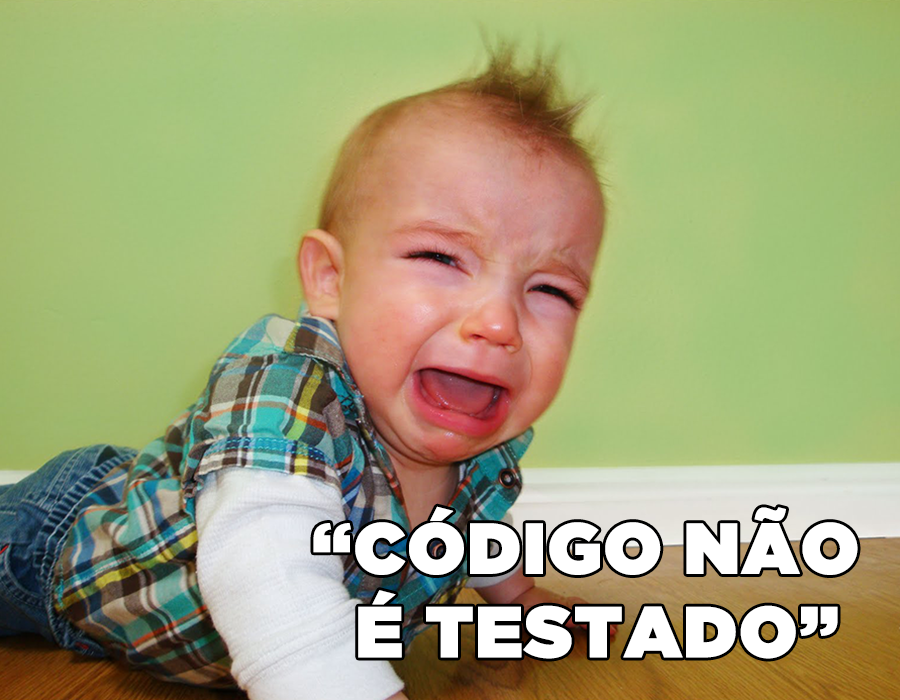
<style>
.page{position:relative;width:900px;height:700px}
.page>*{position:absolute;margin:0}
.t1{font:71.6px/83.4px "GothamUltra";color:#ffffff;font-weight:bold}
</style>
<div class="page">
<p class="t1" style="left:313px;top:506px;width:545px;height:153px;text-align:right">“CÓDIGO NÃO<br>É TESTADO”</p>
</div>
